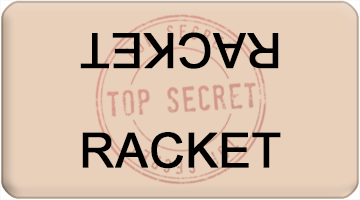
<style>
.page{position:relative;width:360px;height:200px;background:#e8d0bb}
.page>*{position:absolute;margin:0}
.t1{font:48px "ArialMT";color:#000000;font-weight:bold}
</style>
<div class="page">
<p class="t1" style="left:80px;top:32px;width:199px;height:37px;rotate:180deg">RACKET</p>
<p class="t1" style="left:82px;top:132px;width:199px;height:37px">RACKET</p>
</div>
